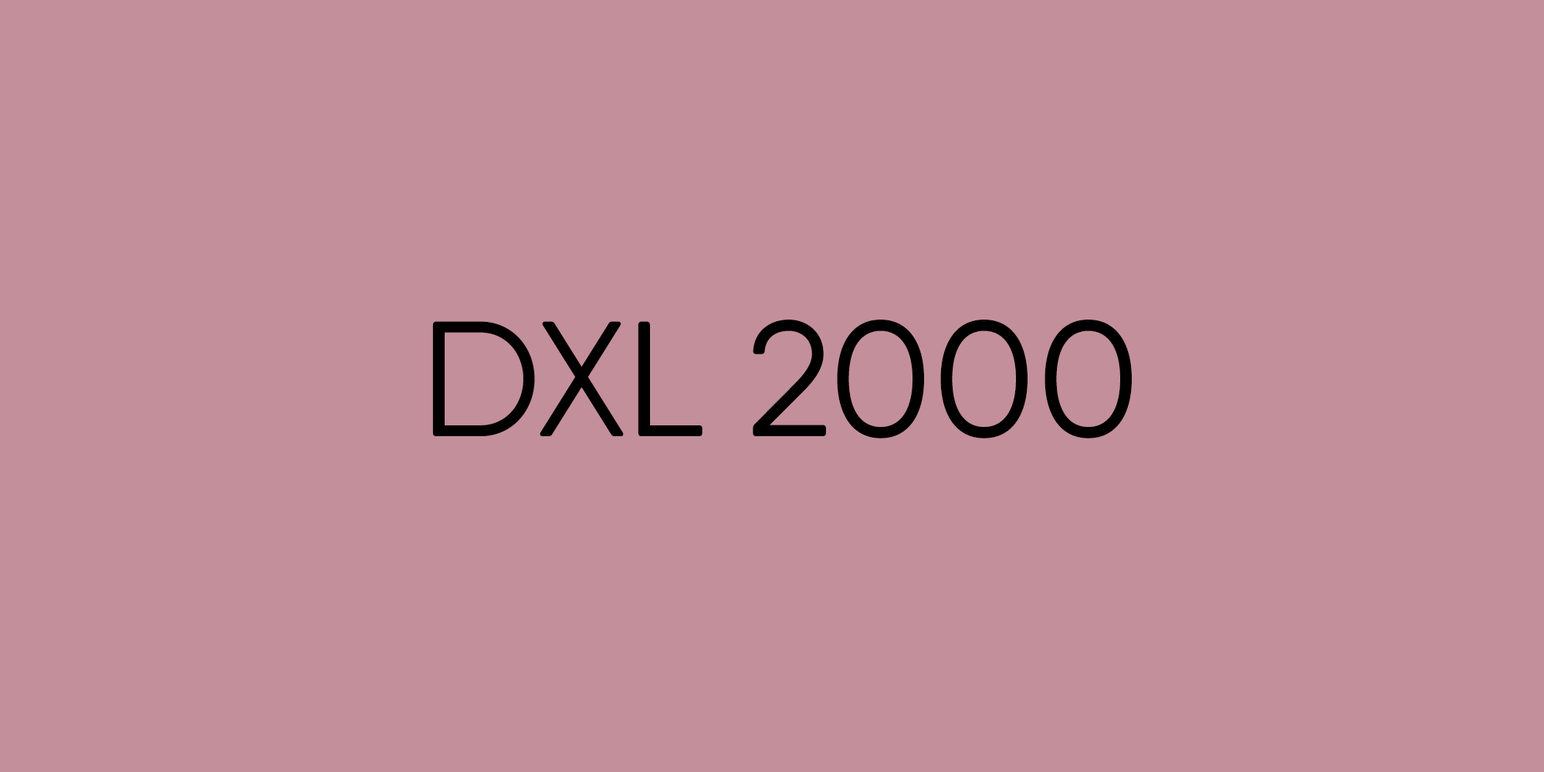
<style>
.page{position:relative;width:1544px;height:772px;background:#c38f9a}
.page>*{position:absolute;margin:0}
.t1{font:163.7px "QanelasSoft-Regular";color:#000000}
</style>
<div class="page">
<p class="t1" style="left:432px;top:320px;width:700px;height:119px">DXL 2000</p>
</div>
